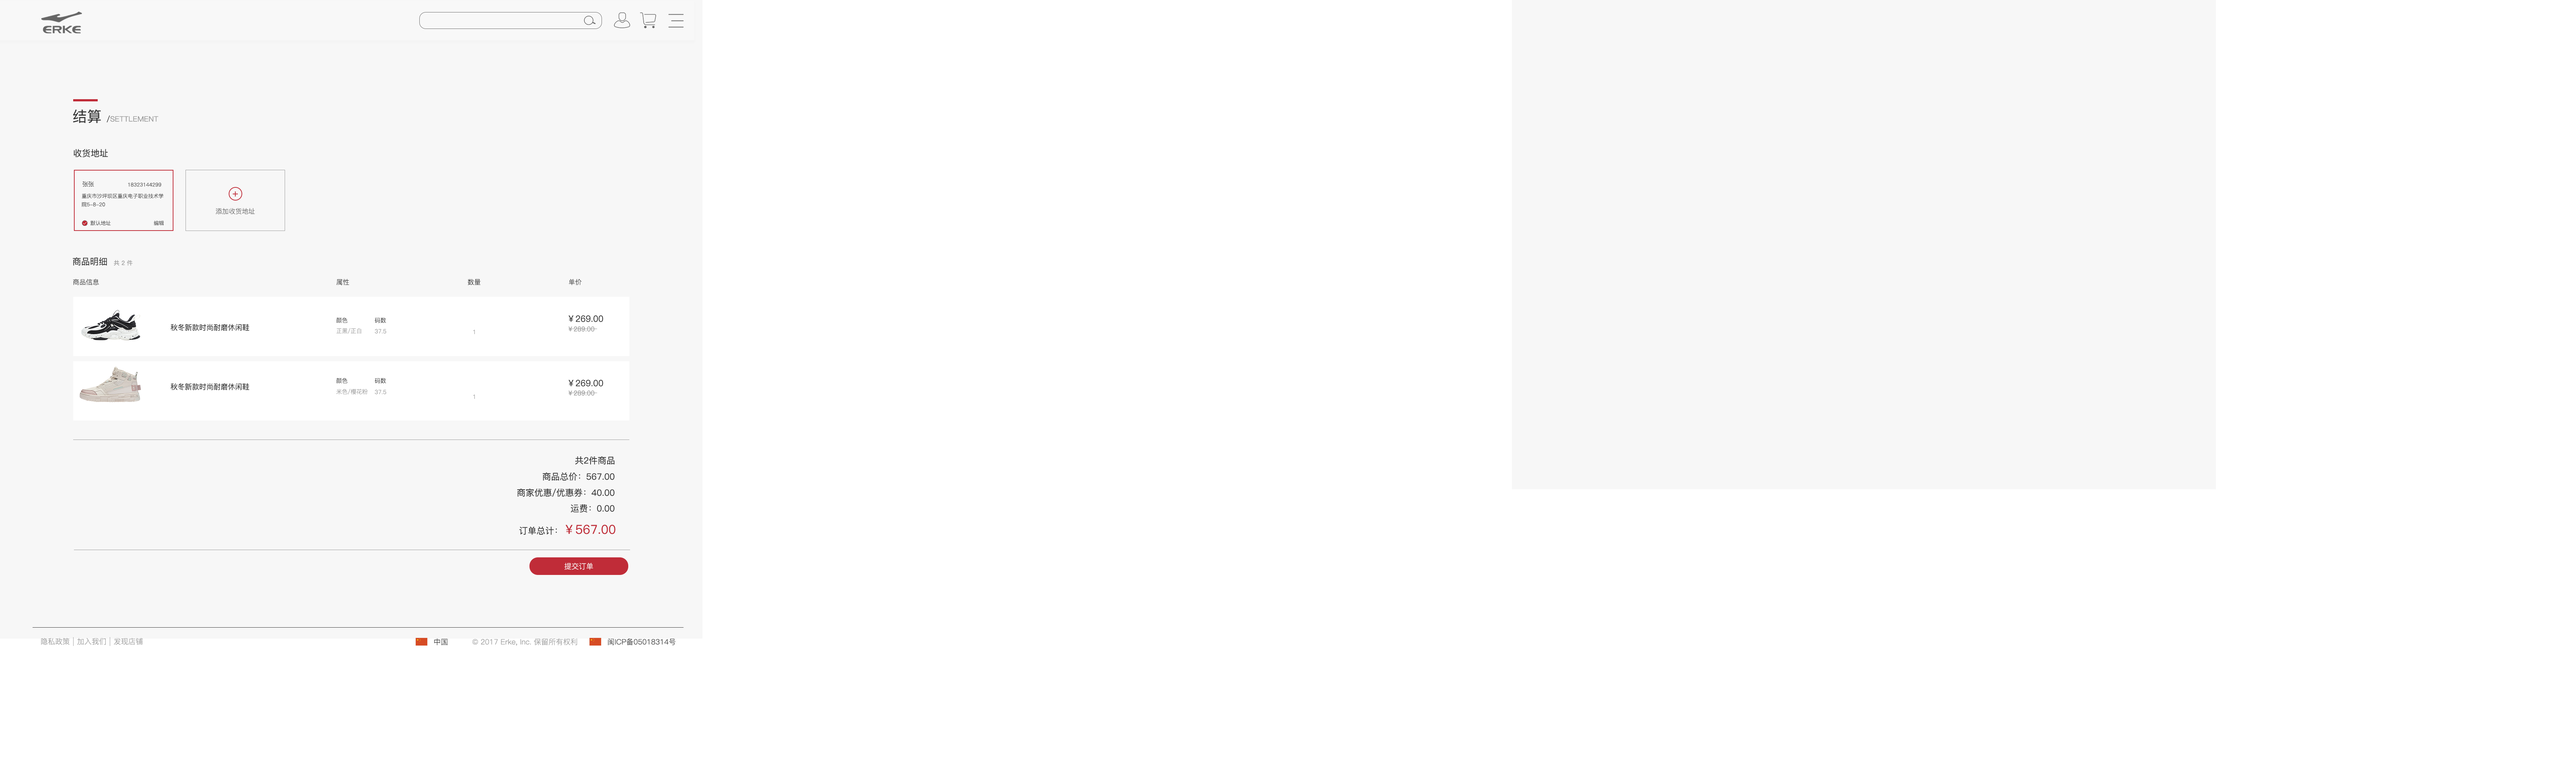
<style>
.page{position:relative;width:2576px;height:770px;background:#ffffff}
.page>*{position:absolute;margin:0}
.t1{font:7.3px "PingFang-SC-Medium";color:#999999}
.t2{font:14.6px "PingFang-SC-Medium";color:#333333}
.t3{font:7.3px "PingFang-SC-Medium";color:#333333}
.t4{font:8.8px "PingFang-SC-Medium";color:#333333}
.t5{font:5.9px "PingFang-SC-Regular";color:#333333}
.t6{font:5.1px "PingFang-SC-Regular";color:#333333}
.t7{font:5.1px/8.4px "PingFang-SC-Regular";color:#333333}
.t8{font:6.6px "PingFang-SC-Regular";color:#666666}
.t9{font:5.9px "PingFang-SC-Medium";color:#999999}
.t10{font:6.6px "PingFang-SC-Regular";color:#333333}
.t11{font:5.9px "PingFang-SC-Regular";color:#323232}
.t12{font:7.3px "PingFang-SC-Medium";color:#323232}
.t13{font:5.9px "PingFang-SC-Regular";color:#999999}
.t14{font:6.6px "PingFang-SC-Medium";color:#999999}
.t15{font:12.4px "PingFang-SC-Medium";color:#c02c38}
.t16{font:7.3px "PingFang-SC-Regular";color:#ffffff}
.t17{font:7.3px "PingFang-SC-Regular";color:#999999}
.t18{font:7.3px "PingFang-SC-Regular";color:#333333}
</style>
<div class="page">
<p class="t1" style="left:73px;top:109px;width:85px;height:14px"><span class="t2">结算 </span><span class="t3">/</span>SETTLEMENT</p>
<p class="t4" style="left:74px;top:149px;width:34px;height:8px">收货地址</p>
<p class="t5" style="left:83px;top:181px;width:11px;height:6px">张张</p>
<p class="t6" style="left:128px;top:183px;width:33px;height:4px">18323144299</p>
<p class="t7" style="left:82px;top:193px;width:82px;height:14px">重庆市沙坪坝区重庆电子职业技术学<br>院5-8-20</p>
<p class="t8" style="left:216px;top:208px;width:39px;height:6px">添加收货地址</p>
<p class="t6" style="left:90px;top:221px;width:21px;height:4px">默认地址</p>
<p class="t6" style="left:154px;top:221px;width:10px;height:4px">编辑</p>
<p class="t4" style="left:73px;top:257px;width:34px;height:9px">商品明细</p>
<p class="t9" style="left:114px;top:260px;width:19px;height:6px">共 2 件</p>
<p class="t10" style="left:73px;top:279px;width:26px;height:6px">商品信息</p>
<p class="t10" style="left:336px;top:279px;width:13px;height:6px">属性</p>
<p class="t10" style="left:468px;top:279px;width:12px;height:6px">数量</p>
<p class="t10" style="left:569px;top:279px;width:13px;height:6px">单价</p>
<p class="t11" style="left:336px;top:317px;width:12px;height:6px">颜色</p>
<p class="t11" style="left:375px;top:317px;width:11px;height:6px">码数</p>
<p class="t4" style="left:569px;top:315px;width:34px;height:7px">￥269.00</p>
<p class="t12" style="left:171px;top:324px;width:78px;height:7px">秋冬新款时尚耐磨休闲鞋</p>
<p class="t13" style="left:336px;top:328px;width:25px;height:6px">正黑/正白</p>
<p class="t13" style="left:375px;top:329px;width:11px;height:5px">37.5</p>
<p class="t13" style="left:473px;top:330px;width:2px;height:4px">1</p>
<p class="t14" style="left:568px;top:326px;width:27px;height:6px">￥289.00</p>
<p class="t11" style="left:336px;top:378px;width:12px;height:5px">颜色</p>
<p class="t11" style="left:375px;top:378px;width:11px;height:5px">码数</p>
<p class="t12" style="left:171px;top:383px;width:78px;height:7px">秋冬新款时尚耐磨休闲鞋</p>
<p class="t13" style="left:336px;top:389px;width:32px;height:5px">米色/樱花粉</p>
<p class="t13" style="left:375px;top:390px;width:11px;height:4px">37.5</p>
<p class="t4" style="left:569px;top:379px;width:34px;height:7px">￥269.00</p>
<p class="t13" style="left:473px;top:394px;width:2px;height:5px">1</p>
<p class="t14" style="left:568px;top:390px;width:27px;height:6px">￥289.00</p>
<p class="t4" style="left:575px;top:456px;width:40px;height:9px">共2件商品</p>
<p class="t4" style="left:543px;top:472px;width:72px;height:9px">商品总价：567.00</p>
<p class="t4" style="left:517px;top:488px;width:98px;height:9px">商家优惠/优惠券：40.00</p>
<p class="t4" style="left:571px;top:504px;width:44px;height:9px">运费：0.00</p>
<p class="t15" style="left:519px;top:524px;width:96px;height:11px"><span class="t4">订单总计：</span>￥567.00</p>
<p class="t16" style="left:564px;top:563px;width:29px;height:7px">提交订单</p>
<p class="t17" style="left:41px;top:638px;width:29px;height:7px">隐私政策</p>
<p class="t17" style="left:77px;top:638px;width:29px;height:7px">加入我们</p>
<p class="t17" style="left:114px;top:638px;width:29px;height:7px">发现店铺</p>
<p class="t18" style="left:434px;top:638px;width:14px;height:7px">中国</p>
<p class="t17" style="left:472px;top:638px;width:105px;height:7px">© 2017 Erke, Inc. 保留所有权利</p>
<p class="t18" style="left:608px;top:638px;width:68px;height:7px">闽ICP备05018314号</p>
</div>
